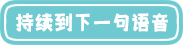
<style>
.page{position:relative;width:183px;height:45px;background:#6ecad0}
.page>*{position:absolute;margin:0}
.t1{font:12px "shetumodengxiaofangti";color:#ffffff;font-weight:bold;scale:0.94 1}
</style>
<div class="page">
<p class="t1" style="left:16px;top:13px;width:152px;height:19px">持续到下一句语音</p>
</div>
